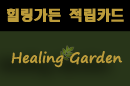
<style>
.page{position:relative;width:130px;height:86px;background:#000000}
.page>*{position:absolute;margin:0}
.t1{font:14px "HeadlineR-HM";color:#bc9c3b}
.t2{font:14.2px "SegoePrint-Bold";color:#bc9c3b}
</style>
<div class="page">
<p class="t1" style="left:7px;top:8px;width:117px;height:14px">힐링가든 적립카드</p>
<p class="t2" style="left:11px;top:51px;width:112px;height:17px">Healing Garden</p>
</div>
